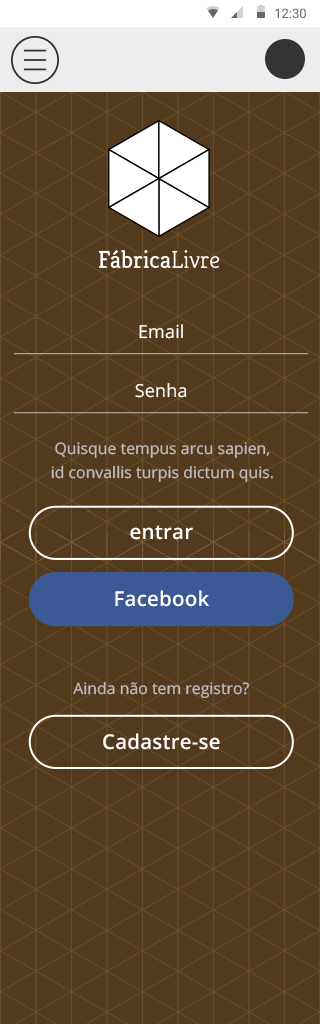
<style>
.page{position:relative;width:320px;height:1024px;background:#533a1d}
.page>*{position:absolute;margin:0}
.t1{font:18.1px "OpenSans";letter-spacing:0.006em;color:#ffffff}
.t2{font:15.7px/24.1px "OpenSans";letter-spacing:0.006em;color:#bdbdbd}
.t3{font:20.5px "OpenSans-Semibold";letter-spacing:0.01em;color:#ffffff}
.t4{font:15.7px "OpenSans";letter-spacing:0.006em;color:#bdbdbd}
</style>
<div class="page">
<p class="t1" style="left:139px;top:324px;width:44px;height:15px">Email</p>
<p class="t1" style="left:135px;top:383px;width:52px;height:15px">Senha</p>
<p class="t2" style="left:51px;top:442px;width:222px;height:40px;text-align:center">Quisque tempus arcu sapien,<br>id convallis turpis dictum quis.</p>
<p class="t3" style="left:130px;top:525px;width:63px;height:15px">entrar</p>
<p class="t3" style="left:115px;top:590px;width:94px;height:17px">Facebook</p>
<p class="t4" style="left:73px;top:681px;width:176px;height:17px">Ainda não tem registro?</p>
<p class="t3" style="left:103px;top:733px;width:117px;height:17px">Cadastre-se</p>
</div>
